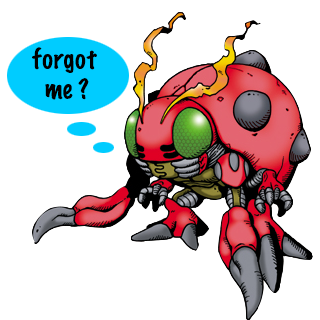
<style>
.page{position:relative;width:320px;height:320px;background:#ffffff}
.page>*{position:absolute;margin:0}
.t1{font:25px "MarkerFelt-Thin";color:#000000}
</style>
<div class="page">
<p class="t1" style="left:32px;top:47px;width:65px;height:53px">forgot <br>  me ?</p>
</div>
